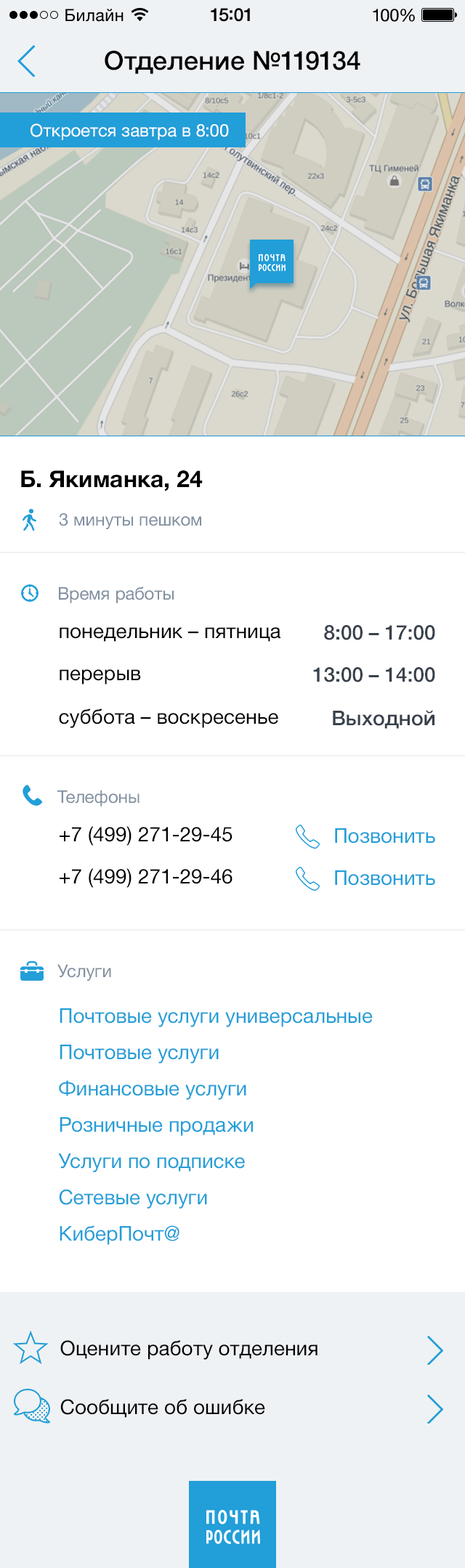
<style>
.page{position:relative;width:465px;height:1568px;background:#ffffff}
.page>*{position:absolute;margin:0}
.t1{font:26.1px "HelveticaNeue-Medium";color:#000000}
.t2{font:17.4px "HelveticaNeue";color:#ffffff}
.t3{font:23.2px "HelveticaNeue-Bold";color:#000000}
.t4{font:17.4px "HelveticaNeue";color:#8190a0}
.t5{font:20.3px "HelveticaNeue";color:#000000}
.t6{font:20.3px "HelveticaNeue-Medium";color:#38414b}
.t7{font:20.3px "HelveticaNeue";color:#229ed8}
.t8{font:20.3px/29px "HelveticaNeue";color:#229ed8}
</style>
<div class="page">
<p class="t1" style="left:105px;top:50px;width:255px;height:24px">Отделение №119134</p>
<p class="t2" style="left:30px;top:123px;width:199px;height:17px">Откроется завтра в 8:00</p>
<p class="t3" style="left:21px;top:470px;width:182px;height:21px">Б. Якиманка, 24</p>
<p class="t4" style="left:59px;top:513px;width:142px;height:16px">3 минуты пешком</p>
<p class="t4" style="left:59px;top:587px;width:114px;height:16px">Время работы</p>
<p class="t5" style="left:60px;top:627px;width:220px;height:15px">понедельник – пятница</p>
<p class="t6" style="left:324px;top:625px;width:111px;height:15px">8:00 – 17:00</p>
<p class="t5" style="left:60px;top:669px;width:81px;height:16px">перерыв</p>
<p class="t6" style="left:313px;top:667px;width:122px;height:15px">13:00 – 14:00</p>
<p class="t5" style="left:59px;top:709px;width:219px;height:19px">суббота – воскресенье</p>
<p class="t6" style="left:332px;top:710px;width:102px;height:19px">Выходной</p>
<p class="t4" style="left:57px;top:790px;width:82px;height:17px">Телефоны</p>
<p class="t5" style="left:60px;top:826px;width:172px;height:20px">+7 (499) 271-29-45</p>
<p class="t7" style="left:335px;top:828px;width:100px;height:16px">Позвонить</p>
<p class="t5" style="left:60px;top:868px;width:172px;height:20px">+7 (499) 271-29-46</p>
<p class="t7" style="left:335px;top:870px;width:100px;height:16px">Позвонить</p>
<p class="t4" style="left:57px;top:964px;width:54px;height:17px">Услуги</p>
<p class="t8" style="left:58px;top:1008px;width:314px;height:237px">Почтовые услуги универсальные<br>Почтовые услуги<br>Финансовые услуги<br>Розничные продажи<br>Услуги по подписке<br>Сетевые услуги<br>КиберПочт@</p>
<p class="t5" style="left:60px;top:1340px;width:257px;height:20px">Оцените работу отделения</p>
<p class="t5" style="left:60px;top:1399px;width:205px;height:19px">Сообщите об ошибке</p>
</div>
